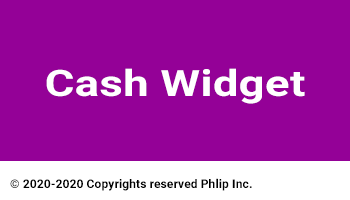
<style>
.page{position:relative;width:350px;height:200px;background:#940197}
.page>*{position:absolute;margin:0}
.t1{font:36.2px "Roboto-Bold";letter-spacing:0.01em;color:#ffffff;scale:1.25 1}
.t2{font:12px "Roboto-Bold";letter-spacing:0.01em;color:#000000}
</style>
<div class="page">
<p class="t1" style="left:46px;top:68px;width:259px;height:36px">Cash Widget</p>
<p class="t2" style="left:10px;top:178px;width:242px;height:13px">© 2020-2020 Copyrights reserved Phlip Inc.</p>
</div>
